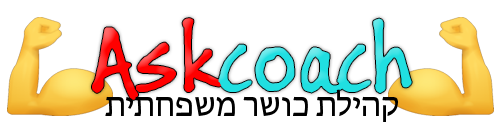
<style>
.page{position:relative;width:500px;height:122px;background:#ffffff}
.page>*{position:absolute;margin:0}
.t1{font:100px "BuxtonSketch";color:#20dfe1}
.t2{font:100px "BuxtonSketch";color:#ff0000}
.t3{font:33.3px "MyriadHebrew-Regular";color:#000000}
</style>
<div class="page">
<p class="t1" style="left:92px;top:18px;width:320px;height:82px"><span class="t2">Ask</span>coach</p>
<p class="t3" style="left:105px;top:89px;width:293px;height:34px">קהילת כושר משפחתית</p>
</div>
